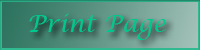
<style>
.page{position:relative;width:200px;height:50px}
.page>*{position:absolute;margin:0}
.t1{font:24px "LucidaCalligraphy-Italic";color:#00c78d}
</style>
<div class="page">
<p class="t1" style="left:29px;top:13px;width:137px;height:27px">Print Page</p>
</div>
